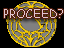
<style>
.page{position:relative;width:64px;height:48px;background:#000000}
.page>*{position:absolute;margin:0}
.t1{font:12px "ComicSansMS";color:#e0c8d0}
</style>
<div class="page">
<p class="t1" style="left:4px;top:9px;width:59px;height:9px">PROCEED?</p>
</div>
